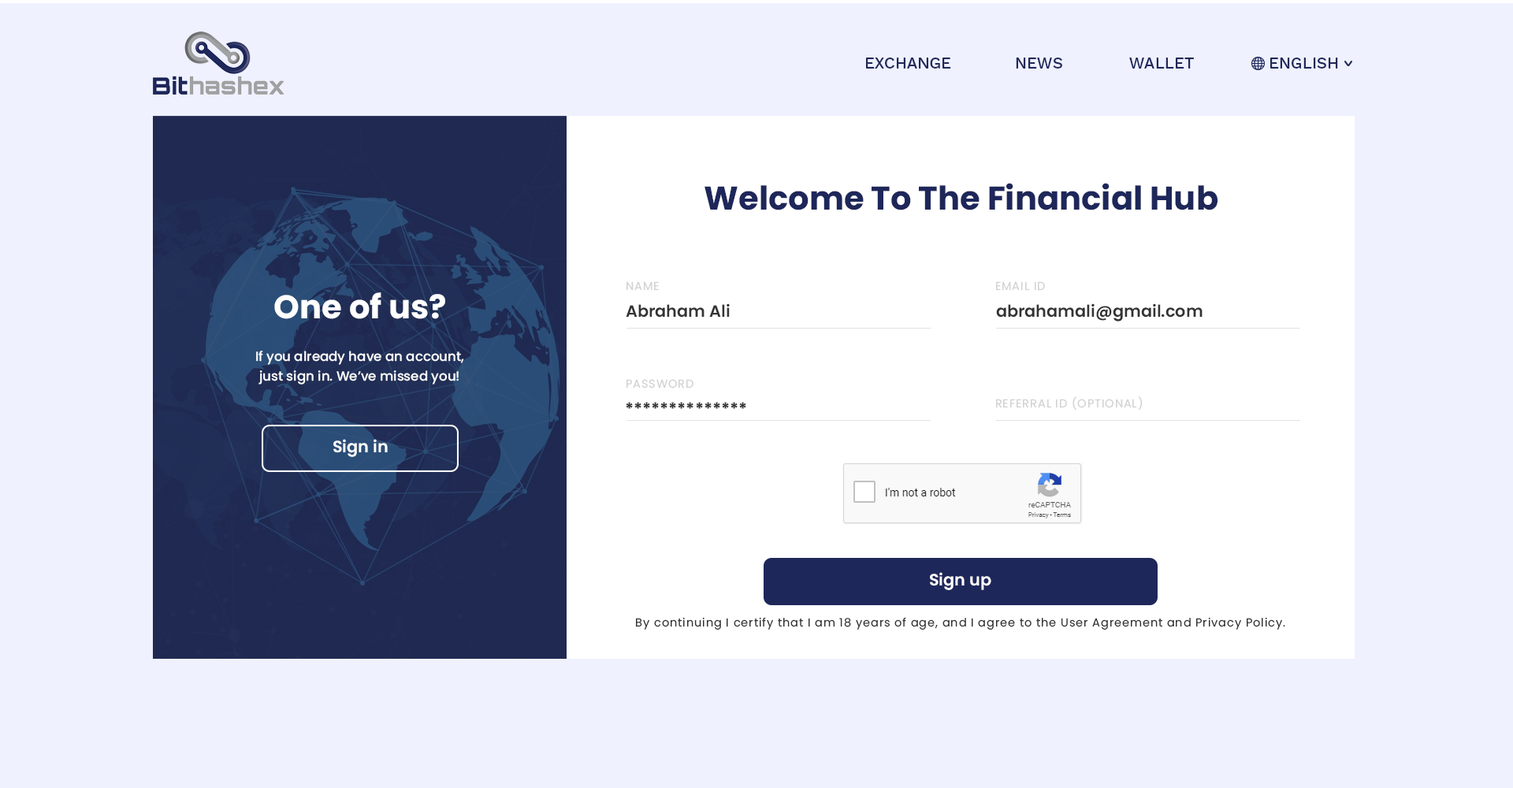
<style>
.page{position:relative;width:1513px;height:788px;background:#eff1ff}
.page>*{position:absolute;margin:0}
.t1{font:16.1px "WorkSans-Medium";color:#1e2759;text-transform:uppercase}
.t2{font:32.8px "Poppins-Bold";color:#1e275a}
.t3{font:11.5px "Poppins-Regular";letter-spacing:0.06em;color:#d2d2d2;text-transform:uppercase}
.t4{font:32.8px "Poppins-Bold";color:#ffffff}
.t5{font:16.4px "Poppins-SemiBold";color:#333333}
.t6{font:13.1px/19.7px "Poppins-Medium";color:#ffffff}
.t7{font:16.4px "Poppins-Bold";color:#333333}
.t8{font:16.4px "Poppins-SemiBold";color:#ffffff}
.t9{font:11.5px "Poppins-Regular";letter-spacing:0.06em;color:#333333}
</style>
<div class="page">
<p class="t1" style="left:866px;top:58px;width:85px;height:11px">exchange</p>
<p class="t1" style="left:1016px;top:58px;width:46px;height:11px">news</p>
<p class="t1" style="left:1129px;top:58px;width:65px;height:11px">wallet</p>
<p class="t1" style="left:1270px;top:58px;width:68px;height:11px">english</p>
<p class="t2" style="left:705px;top:183px;width:513px;height:27px">Welcome To The Financial Hub</p>
<p class="t3" style="left:627px;top:281px;width:32px;height:10px">Name</p>
<p class="t3" style="left:996px;top:281px;width:49px;height:10px">email ID</p>
<p class="t4" style="left:274px;top:292px;width:171px;height:27px">One of us?</p>
<p class="t5" style="left:626px;top:303px;width:104px;height:15px">Abraham Ali</p>
<p class="t5" style="left:996px;top:303px;width:207px;height:19px">abrahamali@gmail.com</p>
<p class="t6" style="left:256px;top:351px;width:208px;height:34px;text-align:center">If you already have an account,<br>just sign in. We’ve missed you!</p>
<p class="t3" style="left:627px;top:379px;width:67px;height:10px">Password</p>
<p class="t7" style="left:626px;top:402px;width:120px;height:7px">**************</p>
<p class="t3" style="left:996px;top:396px;width:147px;height:14px">referral id (optional)</p>
<p class="t8" style="left:333px;top:439px;width:55px;height:18px">Sign in</p>
<p class="t8" style="left:930px;top:572px;width:61px;height:18px">Sign up</p>
<p class="t9" style="left:636px;top:617px;width:649px;height:13px">By continuing I certify that I am 18 years of age, and I agree to the User Agreement and Privacy Policy.</p>
</div>
